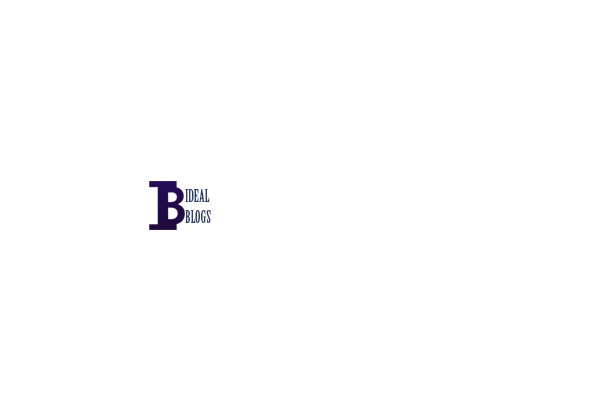
<style>
.page{position:relative;width:600px;height:400px;background:#ffffff}
.page>*{position:absolute;margin:0}
.t1{font:17.2px "BirchStd";color:#2c406c;scale:0.97 1}
</style>
<div class="page">
<p class="t1" style="left:185px;top:189px;width:26px;height:34px">IDEAL<br>BLOGS</p>
</div>
